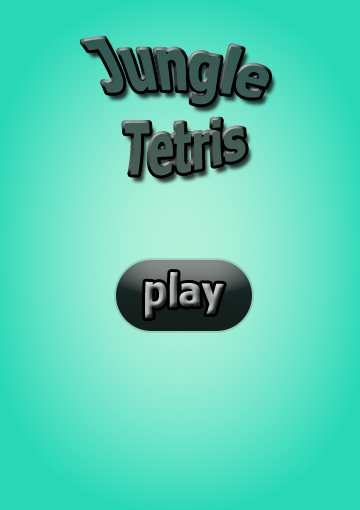
<style>
.page{position:relative;width:360px;height:510px}
.page>*{position:absolute;margin:0}
.t1{font:56px "Tahoma-Bold";color:#3a5c54}
.t2{font:39px "Tahoma-Bold"}
</style>
<div class="page">
<p class="t1" style="left:82px;top:38px;width:187px;height:138px;text-align:center">Jungle<br>Tetris</p>
<p class="t2" style="left:145px;top:272px;width:79px;height:47px">play</p>
</div>
